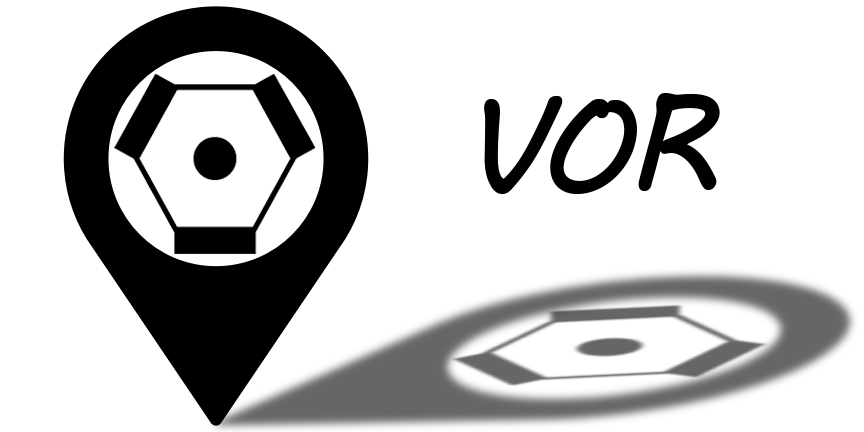
<style>
.page{position:relative;width:864px;height:432px;background:#ffffff}
.page>*{position:absolute;margin:0}
.t1{font:130px "MVBoli";letter-spacing:-0.05em;color:#010101;font-weight:bold}
</style>
<div class="page">
<p class="t1" style="left:484px;top:92px;width:236px;height:103px">VOR</p>
</div>
